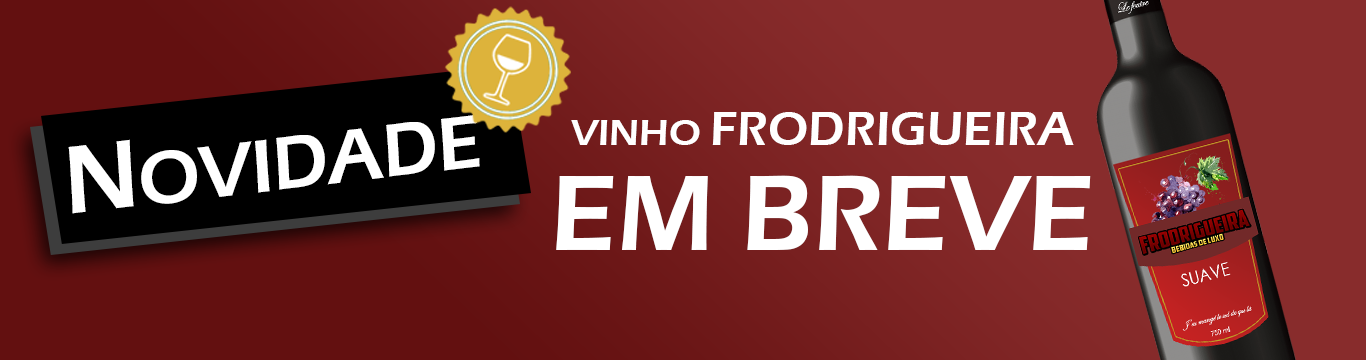
<style>
.page{position:relative;width:1366px;height:360px}
.page>*{position:absolute;margin:0}
.t1{font:48.9px "ErasITC-Demi";color:#ffffff}
.t2{font:38.4px "ErasITC-Demi";color:#ffffff}
.t3{font:77.1px "ErasITC-Demi";color:#ffffff;scale:0.95 1}
.t4{font:99.6px "ErasITC-Demi";color:#ffffff;scale:0.95 1}
.t5{font:110.8px "ErasITC-Demi";color:#ffffff}
</style>
<div class="page">
<p class="t1" style="left:571px;top:112px;width:503px;height:33px"><span class="t2">VINHO </span>FRODRIGUEIRA</p>
<p class="t3" style="left:68px;top:114px;width:412px;height:100px;rotate:-7deg"><span class="t4">N</span>OVIDADE</p>
<p class="t5" style="left:556px;top:175px;width:535px;height:75px">EM BREVE</p>
</div>
